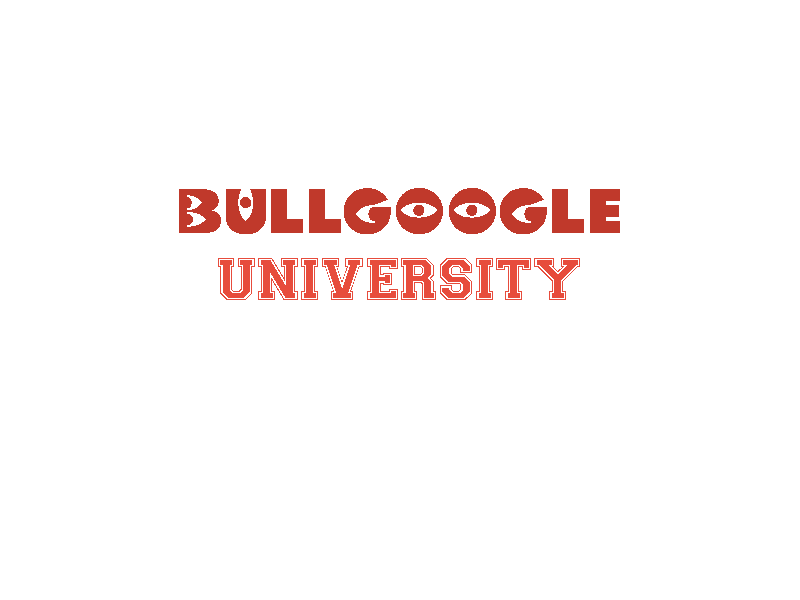
<style>
.page{position:relative;width:800px;height:600px;background:#ffffff}
.page>*{position:absolute;margin:0}
.t1{font:90px "Monster-AG-Regular";color:#c0392b}
.t2{font:60px "Varsity-Regular";color:#e74c3c}
</style>
<div class="page">
<p class="t1" style="left:179px;top:188px;width:441px;height:46px">BULlGOOGLE</p>
<p class="t2" style="left:218px;top:258px;width:362px;height:42px">UNIVERSITY</p>
</div>
